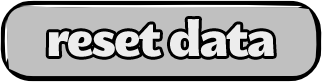
<style>
.page{position:relative;width:322px;height:82px;background:#c0c0c0}
.page>*{position:absolute;margin:0}
.t1{font:44px "MEgalopolisExtra";letter-spacing:-0.05em;color:#ededed}
</style>
<div class="page">
<p class="t1" style="left:48px;top:19px;width:226px;height:38px">reset data</p>
</div>
